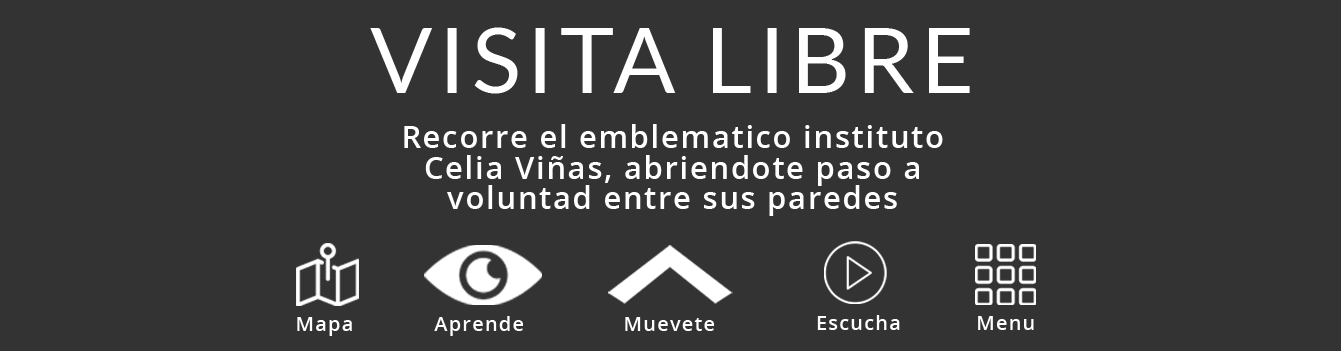
<style>
.page{position:relative;width:1341px;height:351px;background:#333333}
.page>*{position:absolute;margin:0}
.t1{font:92px "Lato-Regular";letter-spacing:0.06em;color:#ffffff}
.t2{font:30.7px/30.7px "OpenSans-Semibold";letter-spacing:0.06em;color:#ffffff}
.t3{font:20px "OpenSans-Semibold";letter-spacing:0.06em;color:#ffffff}
</style>
<div class="page">
<p class="t1" style="left:370px;top:27px;width:600px;height:67px">VISITA LIBRE</p>
<p class="t2" style="left:404px;top:124px;width:539px;height:92px;text-align:center">Recorre el emblematico instituto<br>Celia Viñas, abriendote paso a<br>voluntad entre sus paredes</p>
<p class="t3" style="left:297px;top:317px;width:55px;height:19px">Mapa</p>
<p class="t3" style="left:434px;top:316px;width:89px;height:20px">Aprende</p>
<p class="t3" style="left:625px;top:317px;width:89px;height:14px">Muevete</p>
<p class="t3" style="left:817px;top:315px;width:83px;height:15px">Escucha</p>
<p class="t3" style="left:978px;top:316px;width:56px;height:14px">Menu</p>
</div>
